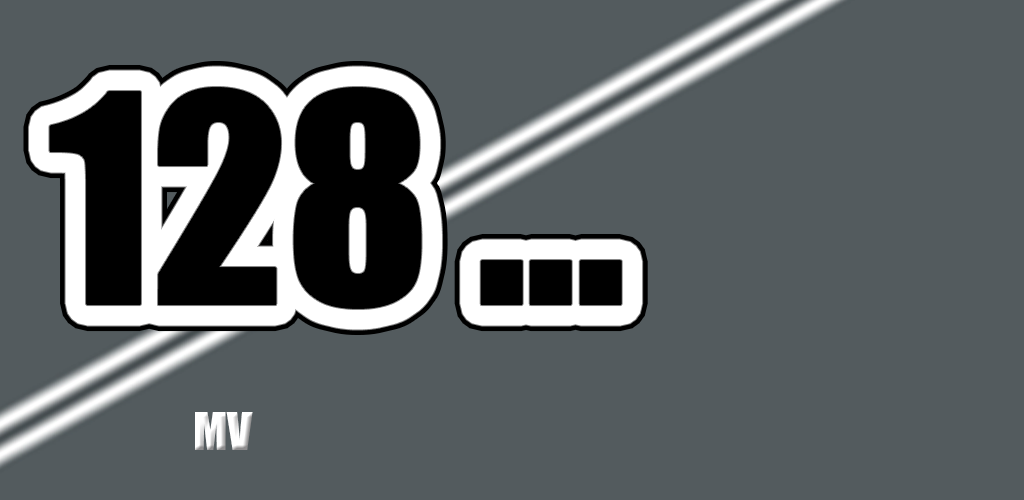
<style>
.page{position:relative;width:1024px;height:500px;background:#535b5e}
.page>*{position:absolute;margin:0}
.t1{font:268.3px "Impact";color:#000000}
.t2{font:47.6px "Impact";color:#ffffff}
</style>
<div class="page">
<p class="t1" style="left:50px;top:88px;width:571px;height:220px">128 ...</p>
<p class="t2" style="left:195px;top:412px;width:58px;height:38px">MV</p>
</div>
